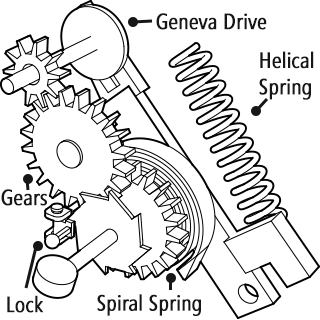
<style>
.page{position:relative;width:320px;height:320px;background:#ffffff}
.page>*{position:absolute;margin:0}
.t1{font:22px "SegoeCondensed";color:#171717;font-weight:bold}
</style>
<div class="page">
<p class="t1" style="left:156px;top:13px;width:111px;height:17px">Geneva Drive</p>
<p class="t1" style="left:259px;top:51px;width:55px;height:49px">Helical<br>Spring</p>
<p class="t1" style="left:1px;top:189px;width:46px;height:17px">Gears</p>
<p class="t1" style="left:97px;top:294px;width:104px;height:22px">Spiral Spring</p>
<p class="t1" style="left:7px;top:295px;width:37px;height:18px">Lock</p>
</div>
